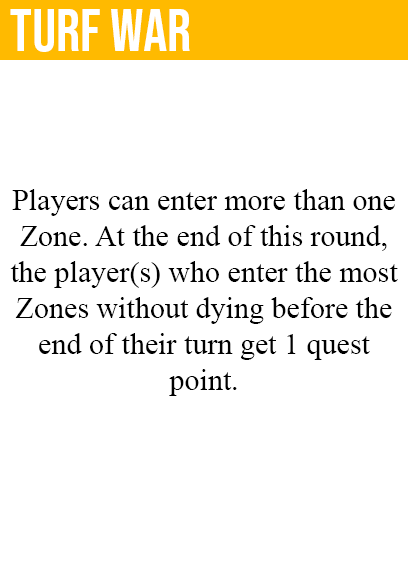
<style>
.page{position:relative;width:408px;height:585px;background:#ffffff}
.page>*{position:absolute;margin:0}
.t1{font:60px "BebasNeue-Regular";color:#ffffff}
.t2{font:30px "TimesNewRomanPSMT";color:#000000}
</style>
<div class="page">
<p class="t1" style="left:10px;top:9px;width:180px;height:43px">turf war</p>
<p class="t2" style="left:10px;top:189px;width:388px;height:207px;text-align:center">Players can enter more than one<br>Zone. At the end of this round,<br>the player(s) who enter the most<br>Zones without dying before the<br>end of their turn get 1 quest<br>point.</p>
</div>
